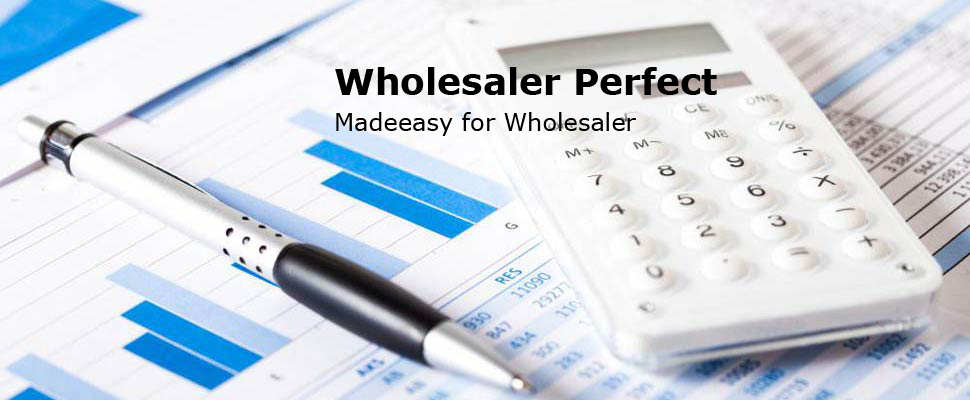
<style>
.page{position:relative;width:970px;height:400px}
.page>*{position:absolute;margin:0}
.t1{font:36px "Verdana-Bold";color:#000000}
.t2{font:24px "Verdana";color:#000000}
</style>
<div class="page">
<p class="t1" style="left:335px;top:67px;width:382px;height:28px">Wholesaler Perfect</p>
<p class="t2" style="left:336px;top:112px;width:300px;height:24px">Madeeasy for Wholesaler</p>
</div>
